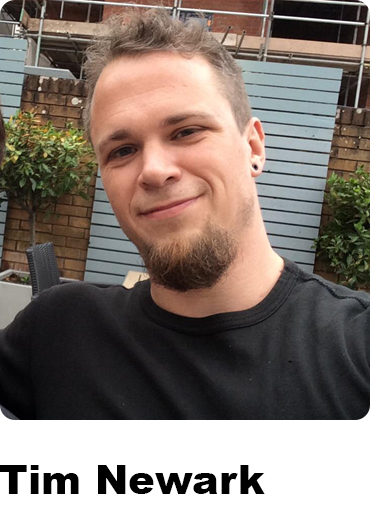
<style>
.page{position:relative;width:370px;height:505px}
.page>*{position:absolute;margin:0}
.t1{font:40px "Arial-Black";color:#000000}
</style>
<div class="page">
<p class="t1" style="left:0px;top:465px;width:265px;height:29px">Tim Newark</p>
</div>
